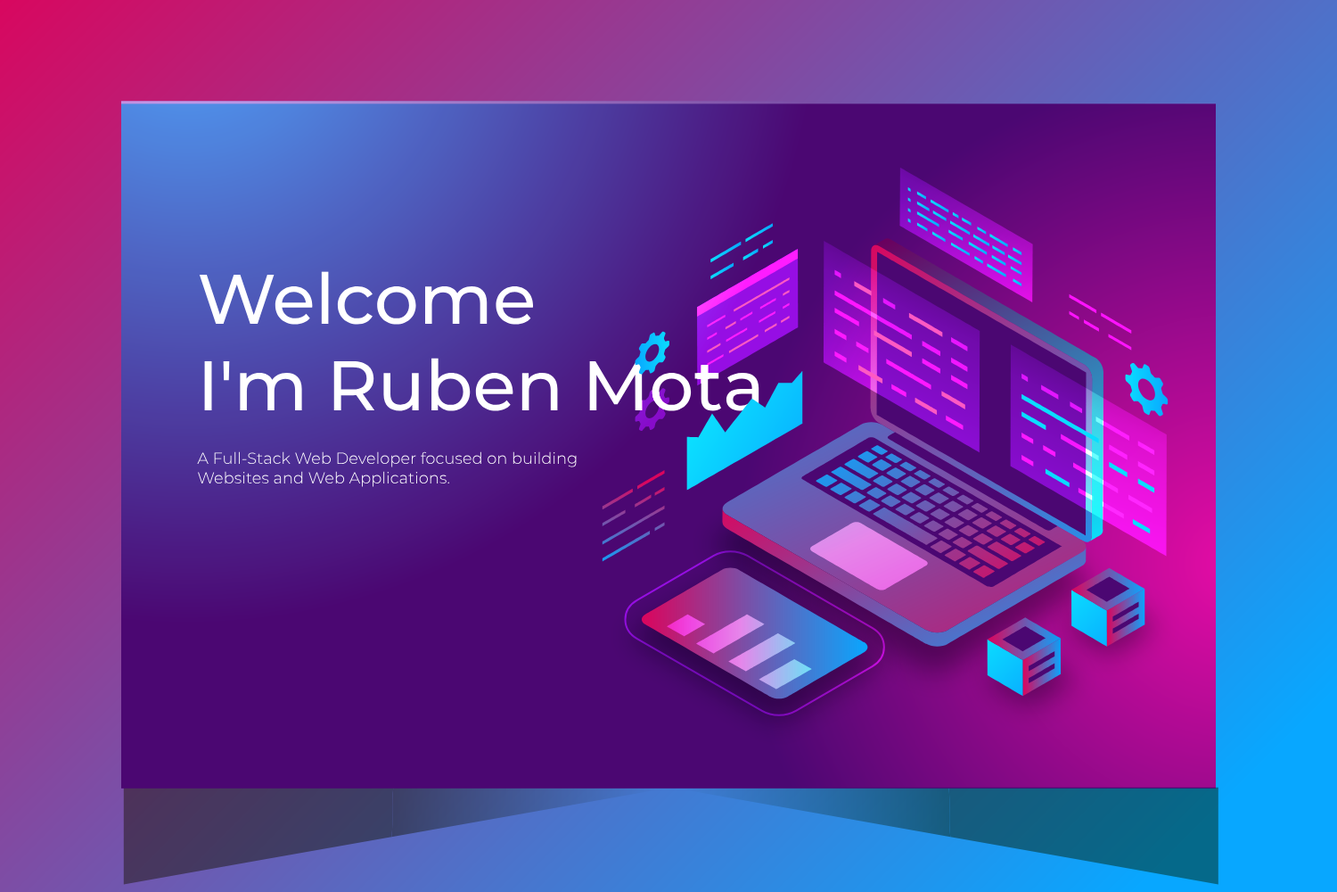
<style>
.page{position:relative;width:1337px;height:892px}
.page>*{position:absolute;margin:0}
.t1{font:70.1px "Montserrat-Medium";color:#ffffff}
.t2{font:15.9px "Montserrat-Light";color:#ffffff}
</style>
<div class="page">
<p class="t1" style="left:199px;top:271px;width:335px;height:54px">Welcome</p>
<p class="t1" style="left:204px;top:358px;width:556px;height:53px">I'm Ruben Mota</p>
<p class="t2" style="left:197px;top:451px;width:380px;height:36px">A Full-Stack Web Developer focused on building<br>Websites and Web Applications.</p>
</div>
